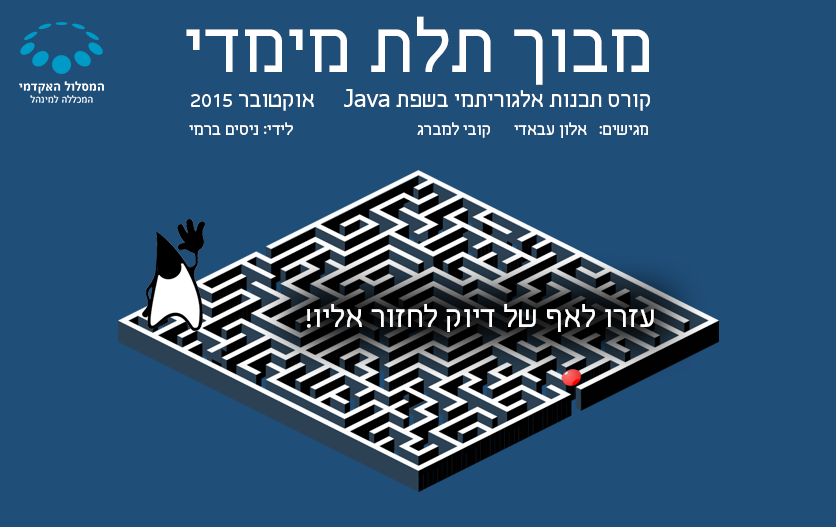
<style>
.page{position:relative;width:836px;height:527px;background:#1f4e79}
.page>*{position:absolute;margin:0}
.t1{font:80px "CarmelitRegular";color:#ffffff}
.t2{font:24px "CarmelitRegular";color:#ffffff}
.t3{font:24px "Tahoma";color:#ffffff}
.t4{font:18px "CarmelitRegular";color:#ffffff}
.t5{font:33px "CarmelitRegular";color:#ffffff}
</style>
<div class="page">
<p class="t1" style="left:186px;top:16px;width:463px;height:69px">מבוך תלת מימדי</p>
<p class="t2" style="left:344px;top:89px;width:306px;height:22px">קורס תכנות אלגוריתמי בשפת <span class="t3">Java</span></p>
<p class="t2" style="left:191px;top:93px;width:123px;height:18px">אוקטובר 2015</p>
<p class="t4" style="left:189px;top:122px;width:459px;height:16px">מגישים:   אלון עבאדי      קובי למברג                    לידי: ניסים ברמי</p>
<p class="t5" style="left:307px;top:304px;width:347px;height:28px">עזרו לאף של דיוק לחזור אליו!</p>
</div>
